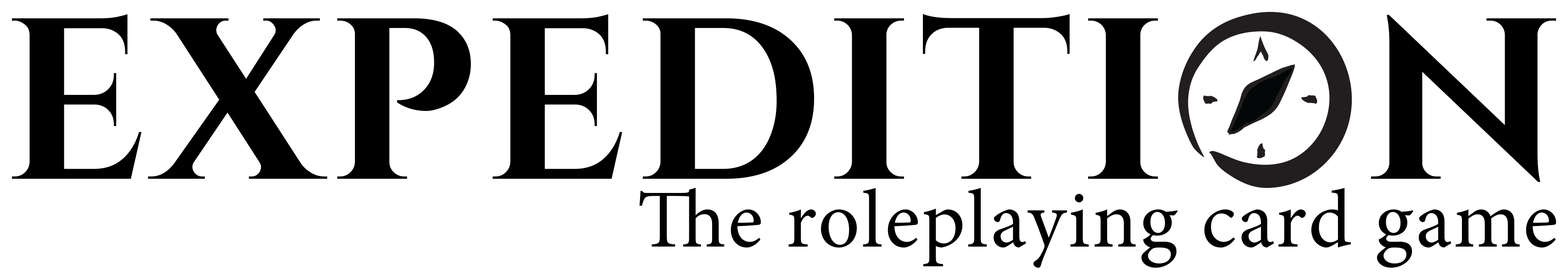
<style>
.page{position:relative;width:1568px;height:275px;background:#ffffff}
.page>*{position:absolute;margin:0}
.t1{font:229.6px "Cinzel-Bold";letter-spacing:0.027em;color:#000000}
.t2{font:82.6px "MinionPro-Regular";letter-spacing:0.027em;color:#000000}
</style>
<div class="page">
<p class="t1" style="left:12px;top:14px;width:1544px;height:168px">EXPEDITI   N</p>
<p class="t2" style="left:639px;top:188px;width:917px;height:80px">The roleplaying card game</p>
</div>
